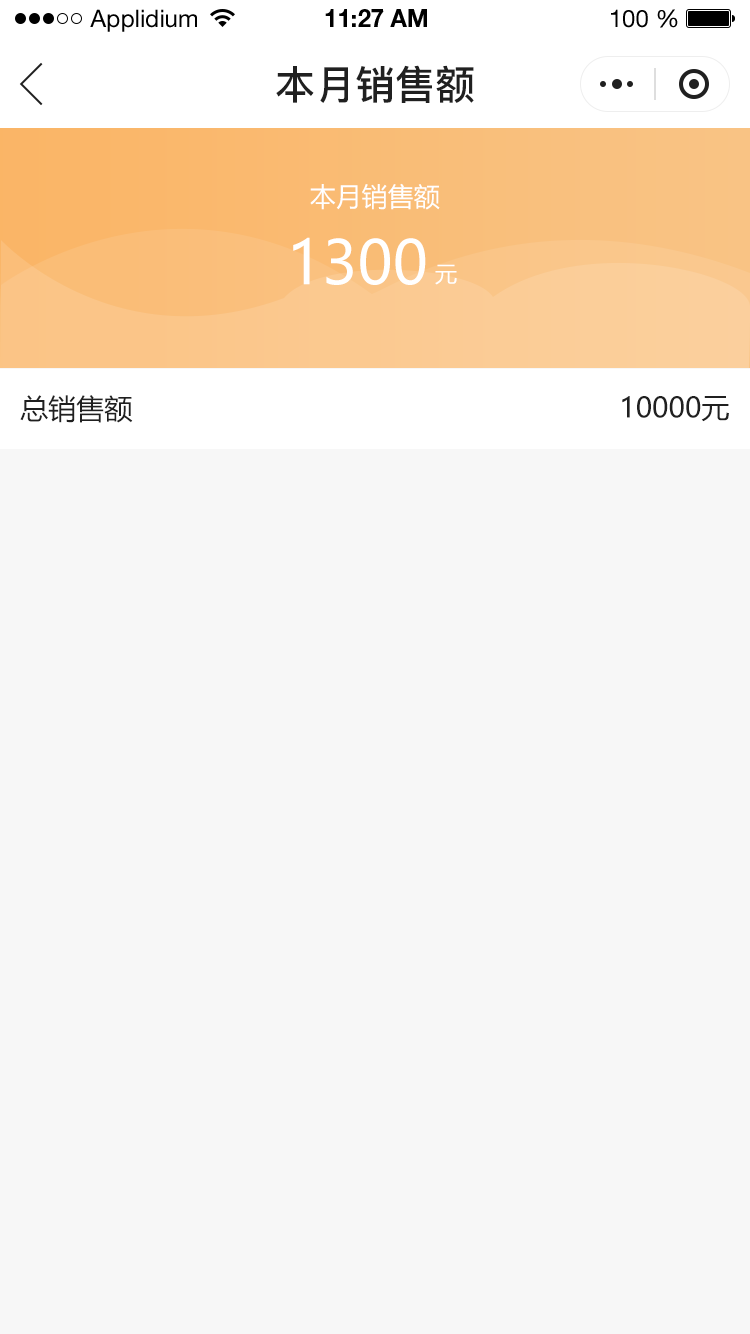
<style>
.page{position:relative;width:750px;height:1334px;background:#f7f7f7}
.page>*{position:absolute;margin:0}
.t1{font:24px "HelveticaNeueLTStd-Roman";color:#000000}
.t2{font:24px "HelveticaNeueLTStd-Bd";color:#000000}
.t3{font:40px "PingFang-SC-Bold";color:#202020;text-transform:uppercase}
.t4{font:26px "MicrosoftYaHei";color:#ffffff;text-transform:uppercase}
.t5{font:60px "MicrosoftYaHei";color:#ffffff;text-transform:uppercase}
.t6{font:22px "MicrosoftYaHei";color:#ffffff;text-transform:uppercase}
.t7{font:28px "MicrosoftYaHei";color:#202020;text-transform:uppercase}
</style>
<div class="page">
<p class="t1" style="left:90px;top:9px;width:107px;height:23px">Applidium</p>
<p class="t2" style="left:325px;top:9px;width:102px;height:18px">11:27 AM</p>
<p class="t1" style="left:611px;top:9px;width:67px;height:19px">100 %</p>
<p class="t3" style="left:276px;top:65px;width:198px;height:38px">本月销售额</p>
<p class="t4" style="left:310px;top:183px;width:130px;height:27px">本月销售额</p>
<p class="t5" style="left:293px;top:237px;width:133px;height:48px">1300</p>
<p class="t6" style="left:435px;top:264px;width:22px;height:21px">元</p>
<p class="t7" style="left:20px;top:395px;width:113px;height:28px">总销售额</p>
<p class="t7" style="left:622px;top:396px;width:107px;height:26px">10000元</p>
</div>
